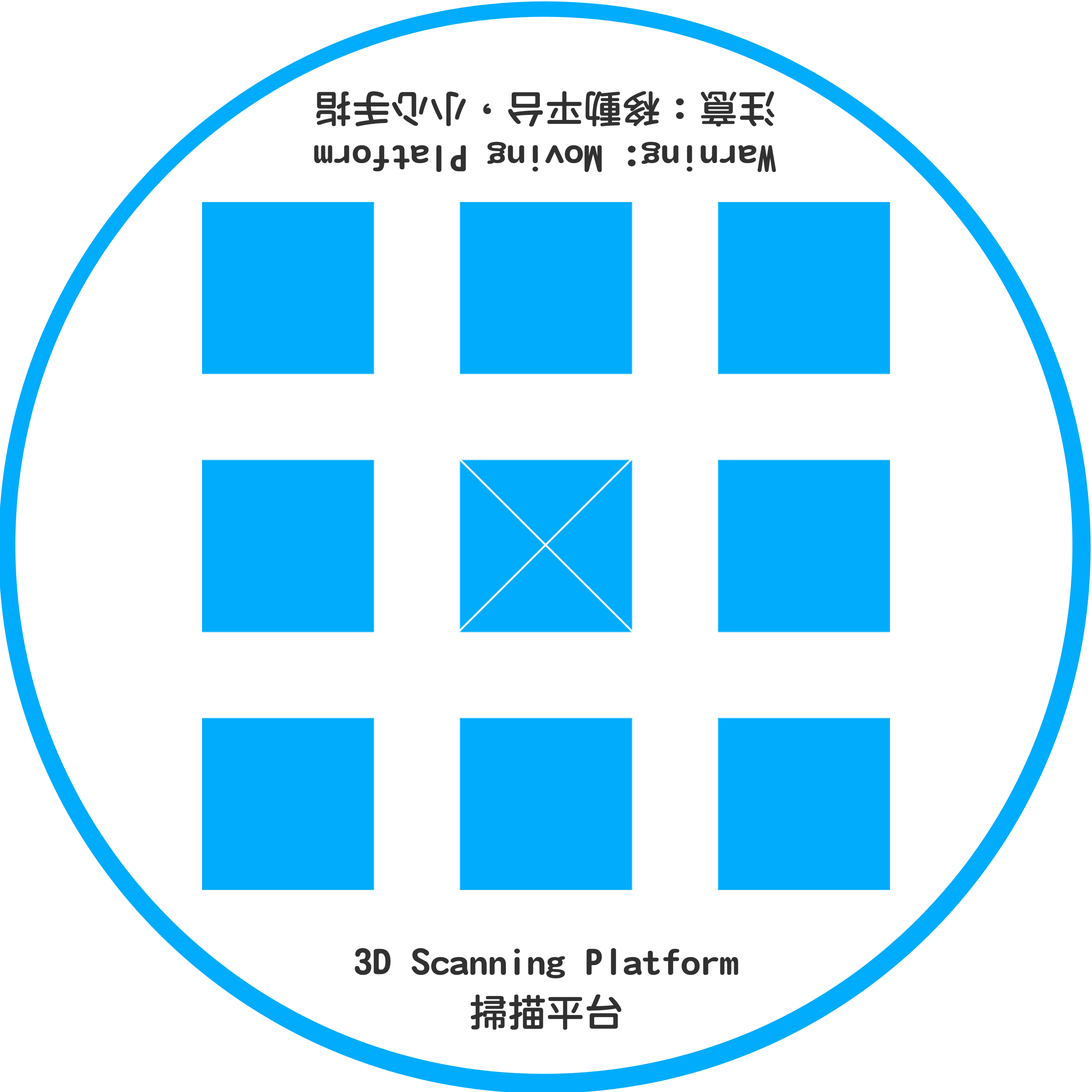
<style>
.page{position:relative;width:1092px;height:1092px;background:#ffffff}
.page>*{position:absolute;margin:0}
.t1{font:38.6px/51.4px "DFYuan-W8-WIN-BF";color:#313131}
.t2{font:38.6px "DFYuan-W8-WIN-BF";color:#313131}
</style>
<div class="page">
<p class="t1" style="left:314px;top:91px;width:462px;height:81px;text-align:center;rotate:180deg">Warning: Moving Platform<br>注意：移動平台，小心手指</p>
<p class="t2" style="left:355px;top:948px;width:383px;height:31px">3D Scanning Platform</p>
<p class="t2" style="left:470px;top:994px;width:152px;height:36px">掃描平台</p>
</div>
